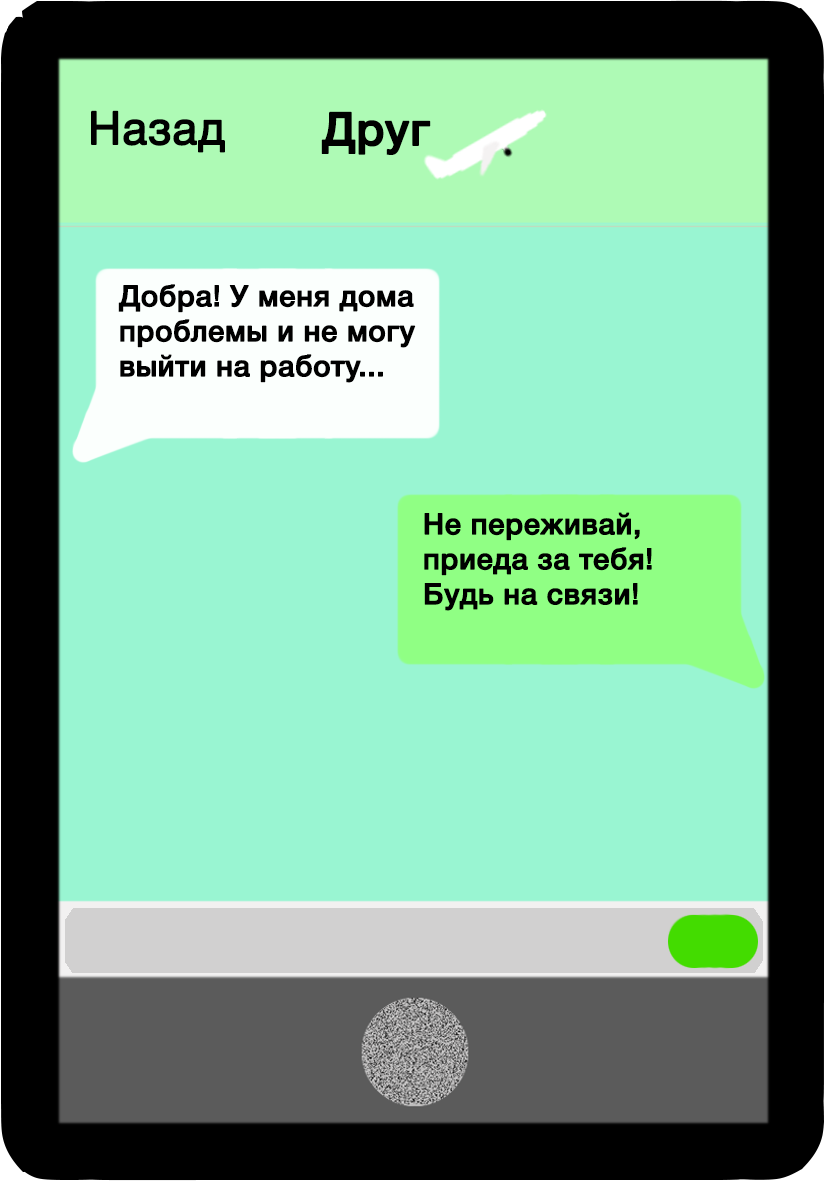
<style>
.page{position:relative;width:826px;height:1182px;background:#99f5d2}
.page>*{position:absolute;margin:0}
.t1{font:45.8px "HelveticaNeueCyr-Roman";color:#000000;font-weight:bold}
.t2{font:45.8px "HelveticaNeueCyr-Medium";color:#000000;font-weight:bold}
.t3{font:29.2px "HelveticaNeueCyr-Medium";color:#000000;font-weight:bold}
</style>
<div class="page">
<p class="t1" style="left:91px;top:110px;width:134px;height:43px">Назад</p>
<p class="t2" style="left:321px;top:111px;width:176px;height:44px">Друг    .</p>
<p class="t3" style="left:118px;top:284px;width:298px;height:99px;text-align:right">Добра! У меня дома проблемы и не могу выйти на работу...</p>
<p class="t3" style="left:424px;top:512px;width:228px;height:99px;text-align:right">Не переживай, приеда за тебя!<br>Будь на связи!</p>
</div>
